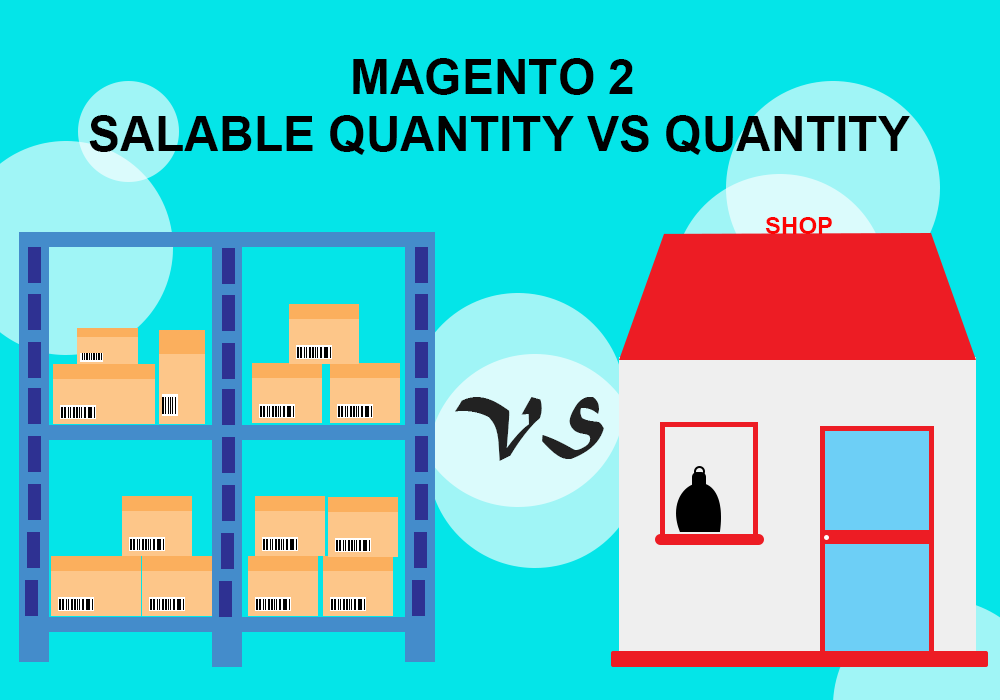
<style>
.page{position:relative;width:1000px;height:700px;background:#04e5e8}
.page>*{position:absolute;margin:0}
.t1{font:48px "Arial-BoldMT";color:#000000;text-transform:uppercase}
.t2{font:24px "Arial-BoldMT";color:#fc0404}
.t3{font:72px "MaturaMTScriptCapitals";color:#222222}
</style>
<div class="page">
<p class="t1" style="left:89px;top:58px;width:821px;height:97px;text-align:center">Magento 2 <br>Salable Quantity vs Quantity</p>
<p class="t2" style="left:765px;top:217px;width:67px;height:17px">SHOP</p>
<p class="t3" style="left:455px;top:397px;width:149px;height:64px">VS</p>
</div>
